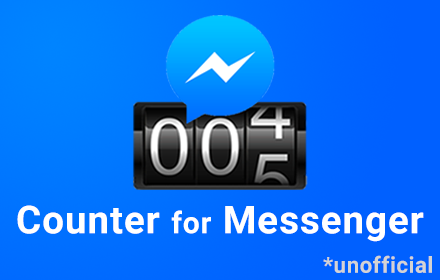
<style>
.page{position:relative;width:440px;height:280px}
.page>*{position:absolute;margin:0}
.t1{font:38.5px "Roboto-Bold";letter-spacing:0.025em;color:#ffffff}
.t2{font:30px "Roboto-Bold";letter-spacing:0.025em;color:#ffffff}
.t3{font:22.3px "Roboto-Bold";letter-spacing:0.025em;color:#d3d3d3}
</style>
<div class="page">
<p class="t1" style="left:17px;top:205px;width:407px;height:37px">Counter <span class="t2">for</span> Messenger</p>
<p class="t3" style="left:323px;top:255px;width:109px;height:18px">*unofficial</p>
</div>
